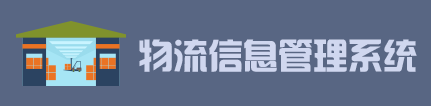
<style>
.page{position:relative;width:431px;height:106px;background:#586683}
.page>*{position:absolute;margin:0}
.t1{font:35px "¹ã½Ý¾ÓÃÔÄã×Ö¿â";color:#d0d7ef}
</style>
<div class="page">
<p class="t1" style="left:139px;top:39px;width:278px;height:33px">物流信息管理系统</p>
</div>
